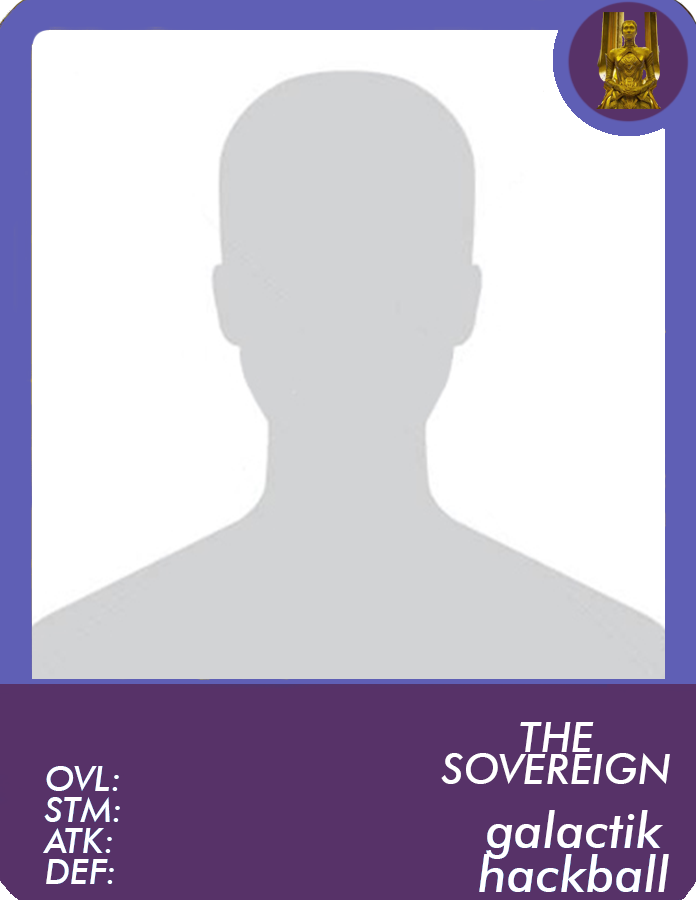
<style>
.page{position:relative;width:696px;height:900px;background:#ffffff}
.page>*{position:absolute;margin:0}
.t1{font:42px "FuturaBT-MediumItalic";color:#ffffff}
.t2{font:35px/31px "FuturaBT-MediumItalic";color:#ffffff}
.t3{font:50.3px/44.7px "FuturaBT-MediumItalic";color:#ffffff}
</style>
<div class="page">
<p class="t1" style="left:441px;top:722px;width:229px;height:62px">THE SOVEREIGN</p>
<p class="t2" style="left:43px;top:766px;width:77px;height:118px">OVL:<br>STM:<br>ATK:<br>DEF:</p>
<p class="t3" style="left:479px;top:810px;width:190px;height:82px;text-align:center">galactik<br>hackball</p>
</div>
